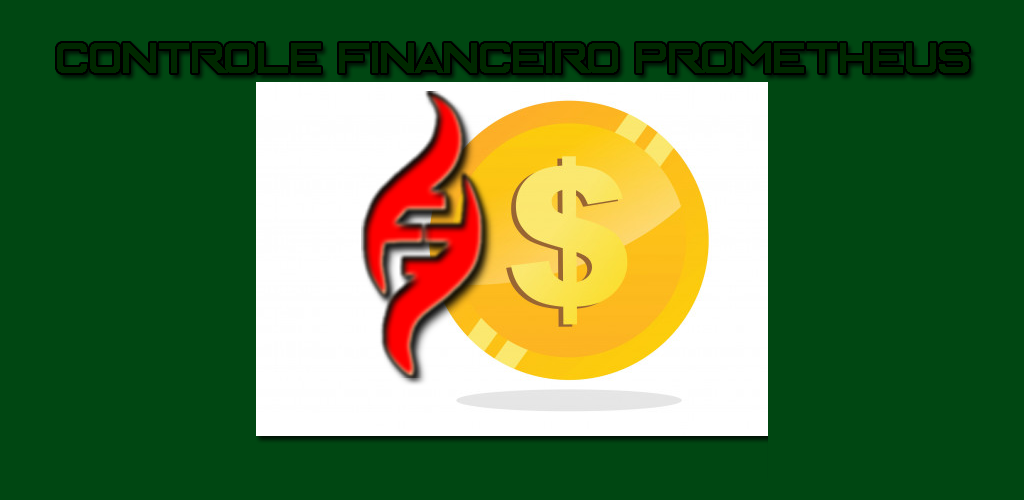
<style>
.page{position:relative;width:1024px;height:500px;background:#004712}
.page>*{position:absolute;margin:0}
.t1{font:48px "Enter-The-Grid";color:#002800}
</style>
<div class="page">
<p class="t1" style="left:57px;top:43px;width:912px;height:30px">CONTROLE FINANCEIRO PROMETHEUS</p>
</div>
